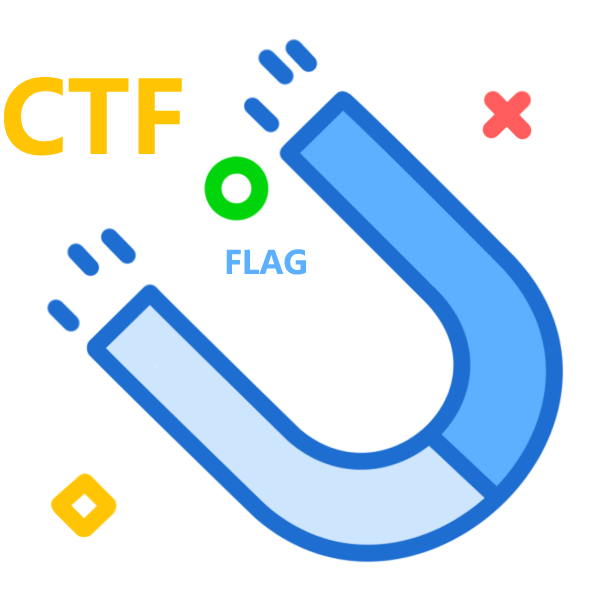
<style>
.page{position:relative;width:600px;height:600px;background:#ffffff}
.page>*{position:absolute;margin:0}
.t1{font:100px "MicrosoftYaHei-Bold";color:#ffc504}
.t2{font:32px "MicrosoftYaHei-Bold";color:#5cb0ff}
</style>
<div class="page">
<p class="t1" style="left:4px;top:77px;width:178px;height:79px">CTF</p>
<p class="t2" style="left:226px;top:249px;width:80px;height:26px">FLAG</p>
</div>
